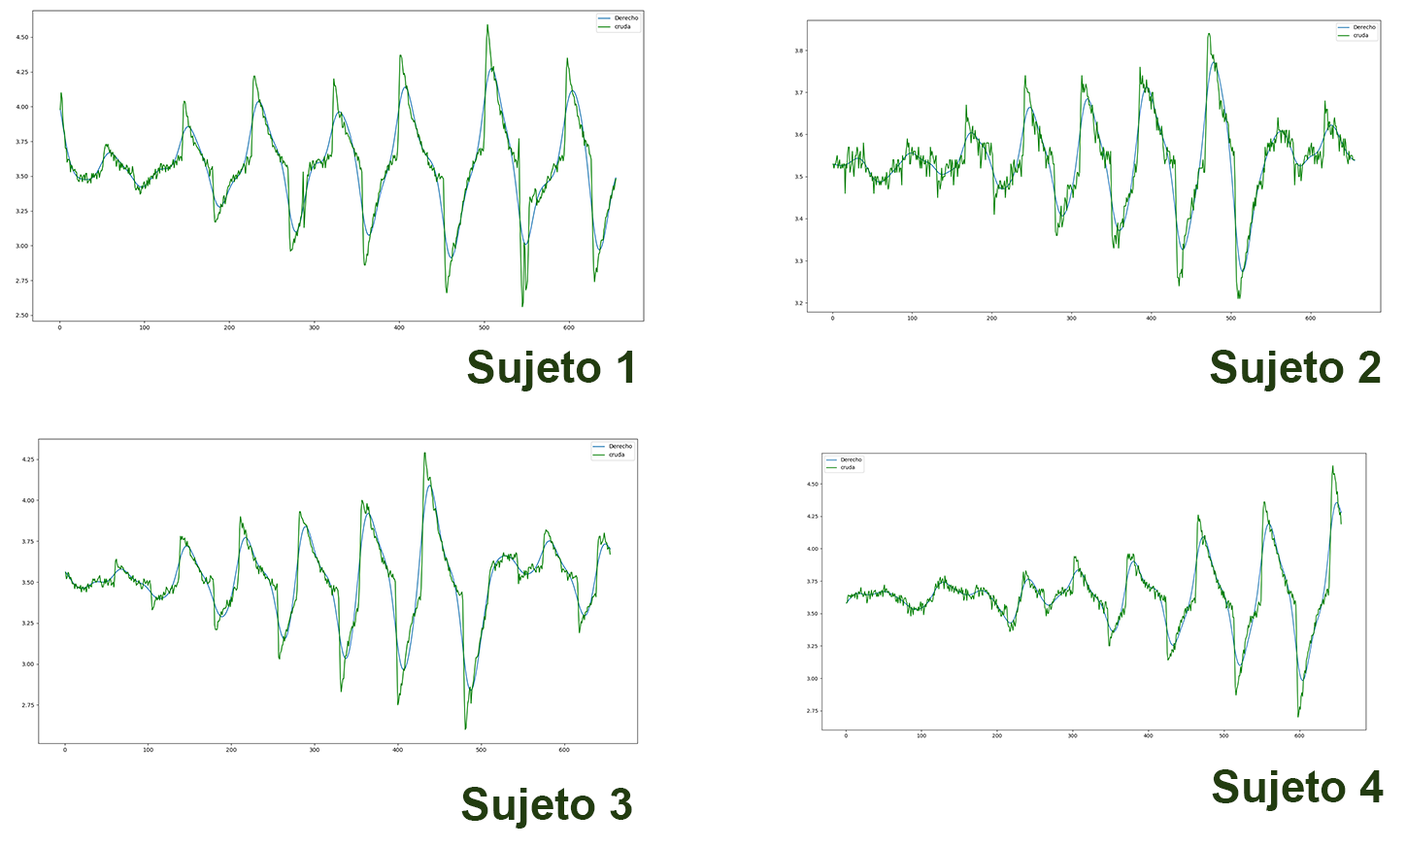
<style>
.page{position:relative;width:1406px;height:848px;background:#ffffff}
.page>*{position:absolute;margin:0}
.t1{font:44.5px "Arial-BoldMT";color:#223c10}
</style>
<div class="page">
<p class="t1" style="left:467px;top:350px;width:166px;height:41px">Sujeto 1</p>
<p class="t1" style="left:1210px;top:350px;width:171px;height:41px">Sujeto 2</p>
<p class="t1" style="left:1212px;top:769px;width:172px;height:42px">Sujeto 4</p>
<p class="t1" style="left:461px;top:787px;width:171px;height:41px">Sujeto 3</p>
</div>
